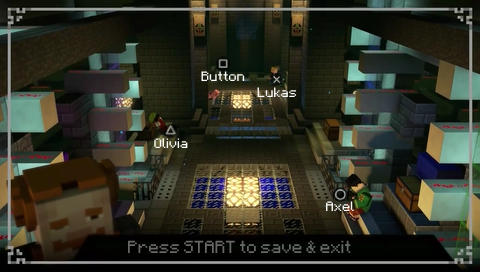
<style>
.page{position:relative;width:480px;height:272px}
.page>*{position:absolute;margin:0}
.t1{font:11px "Minecraft";color:#ffffff}
.t2{font:14px "Minecraft";color:#676866}
</style>
<div class="page">
<p class="t1" style="left:201px;top:71px;width:44px;height:10px">Button</p>
<p class="t1" style="left:257px;top:87px;width:40px;height:10px">Lukas</p>
<p class="t1" style="left:154px;top:138px;width:34px;height:10px">Olivia</p>
<p class="t1" style="left:326px;top:201px;width:28px;height:10px">Axel</p>
<p class="t2" style="left:128px;top:240px;width:223px;height:13px">Press START to save &amp; exit</p>
</div>
